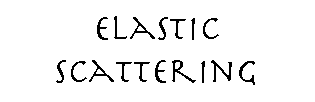
<style>
.page{position:relative;width:315px;height:102px;background:#ffffff}
.page>*{position:absolute;margin:0}
.t1{font:36px "Herculanum";color:#000000}
</style>
<div class="page">
<p class="t1" style="left:56px;top:16px;width:199px;height:69px">Elastic<br>Scattering</p>
</div>
